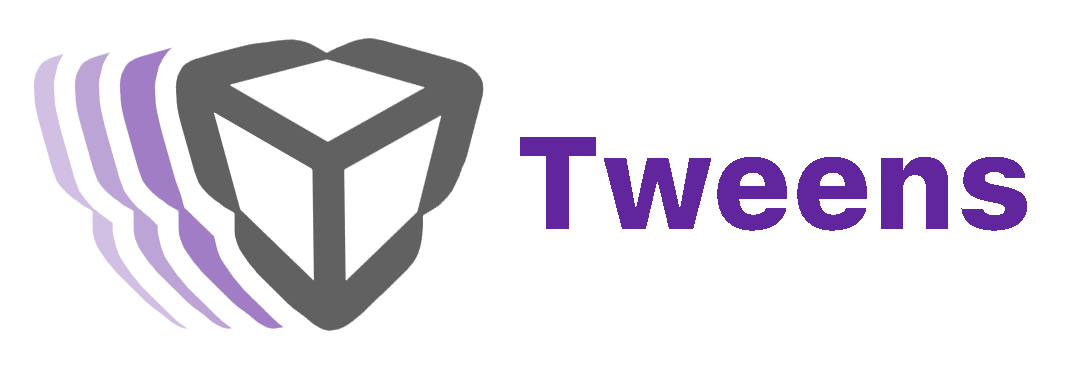
<style>
.page{position:relative;width:1072px;height:369px;background:#ffffff}
.page>*{position:absolute;margin:0}
.t1{font:130px "SFProText-Heavy";color:#61269d}
</style>
<div class="page">
<p class="t1" style="left:520px;top:137px;width:507px;height:94px">Tweens</p>
</div>
